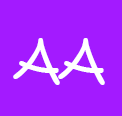
<style>
.page{position:relative;width:122px;height:116px;background:#a31aff}
.page>*{position:absolute;margin:0}
.t1{font:50px "KristenITC-Regular";color:#ffffff}
</style>
<div class="page">
<p class="t1" style="left:13px;top:38px;width:92px;height:47px">AA</p>
</div>
